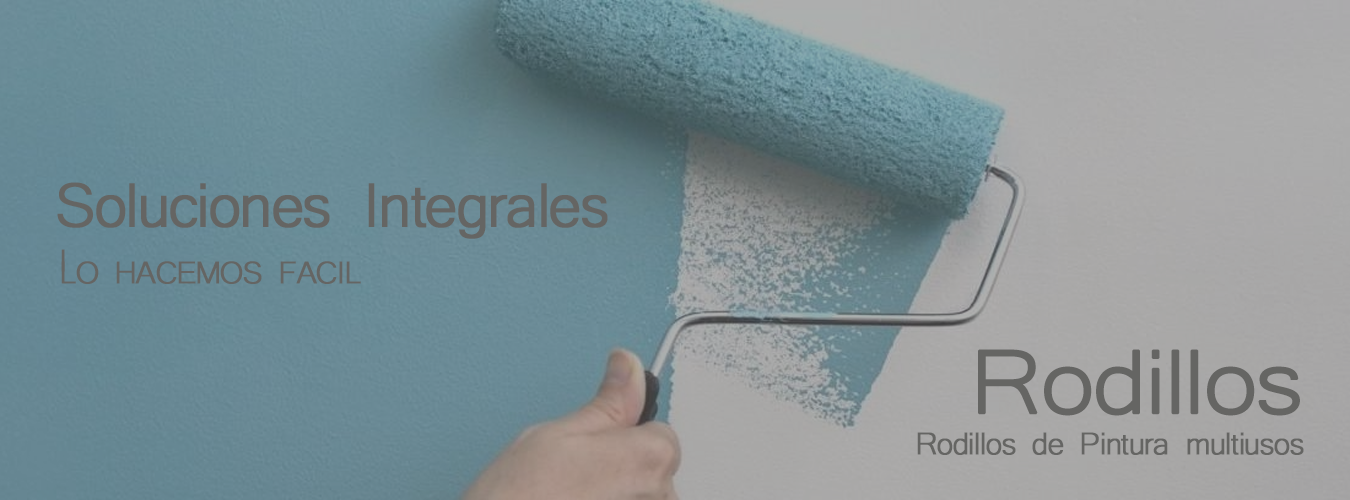
<style>
.page{position:relative;width:1350px;height:500px}
.page>*{position:absolute;margin:0}
.t1{font:80px "Microsoft-Yi-Baiti";letter-spacing:-0.05em;color:#656563;font-weight:bold}
.t2{font:40px "Microsoft-Yi-Baiti";letter-spacing:-0.05em;color:#656563;font-weight:bold}
.t3{font:116.4px "Microsoft-Yi-Baiti";letter-spacing:-0.05em;color:#656563;font-weight:bold;scale:1.14 1}
</style>
<div class="page">
<p class="t1" style="left:57px;top:182px;width:551px;height:57px">Soluciones Integrales</p>
<p class="t2" style="left:61px;top:249px;width:300px;height:35px">l<br>LO HACEMOS FACIL</p>
<p class="t3" style="left:978px;top:349px;width:322px;height:67px">Rodillos</p>
<p class="t2" style="left:917px;top:432px;width:387px;height:23px">Rodillos de Pintura multiusos</p>
</div>
